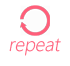
<style>
.page{position:relative;width:70px;height:66px;background:#ffffff}
.page>*{position:absolute;margin:0}
.t1{font:19px "SegoeUI-Light";color:#ff5e79;font-style:italic}
</style>
<div class="page">
<p class="t1" style="left:9px;top:38px;width:52px;height:18px">repeat</p>
</div>
